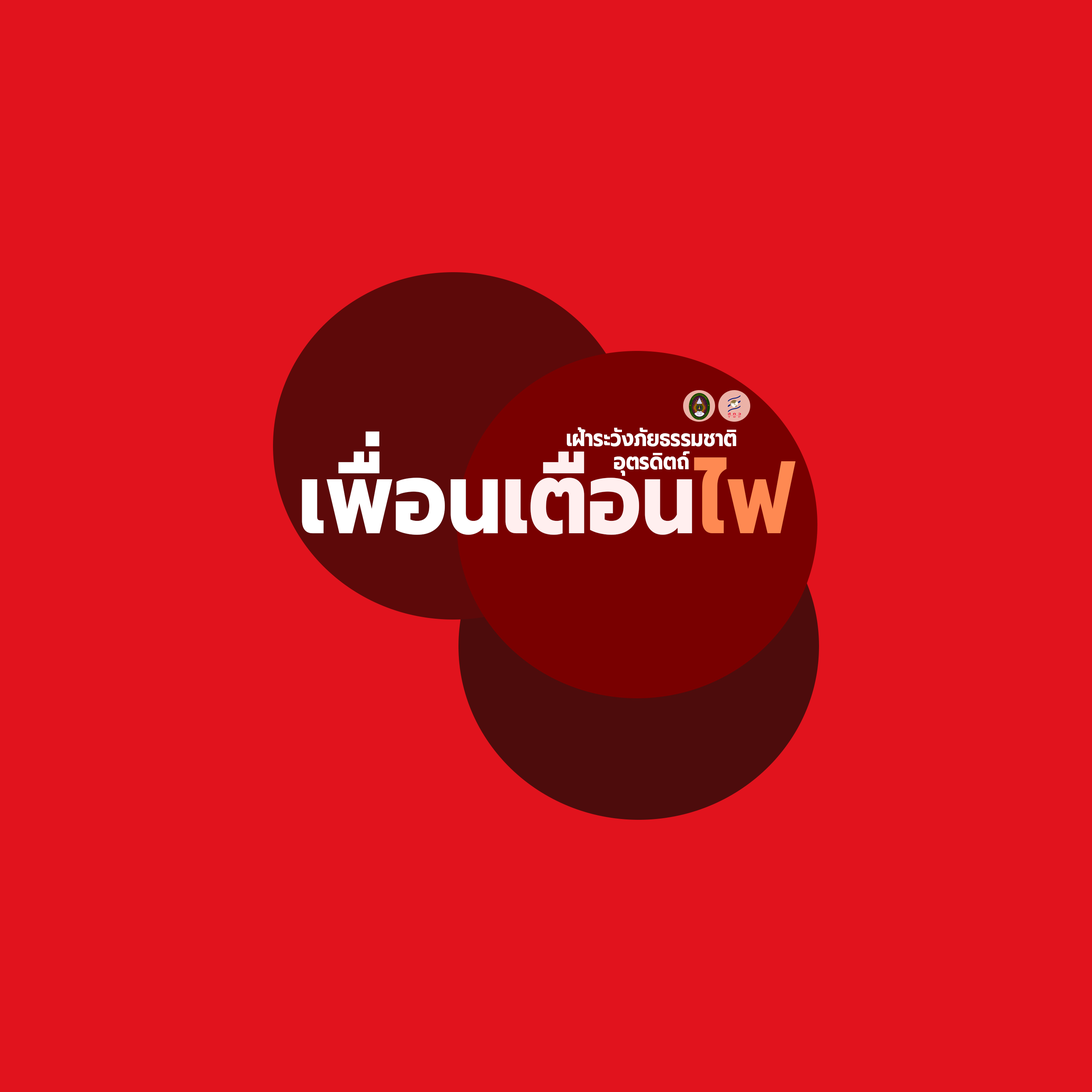
<style>
.page{position:relative;width:1092px;height:1092px;background:#e1131d}
.page>*{position:absolute;margin:0}
.t1{font:100.7px "Prompt-Bold";color:#ffffff;scale:0.85 1}
.t2{font:100.7px "Prompt-Bold";color:#ffefef;scale:0.85 1}
.t3{font:100.7px "Prompt-Bold";color:#fe8952;scale:0.85 1}
.t4{font:23.4px "Prompt-Bold";color:#ffffff;scale:0.83 1}
</style>
<div class="page">
<p class="t1" style="left:302px;top:431px;width:494px;height:104px">เพื่อน<span class="t2">เตือน</span><span class="t3">ไฟ</span></p>
<p class="t4" style="left:567px;top:427px;width:169px;height:49px;text-align:center">เฝ้าระวังภัยธรรมชาติ<br>อุตรดิตถ์</p>
</div>
